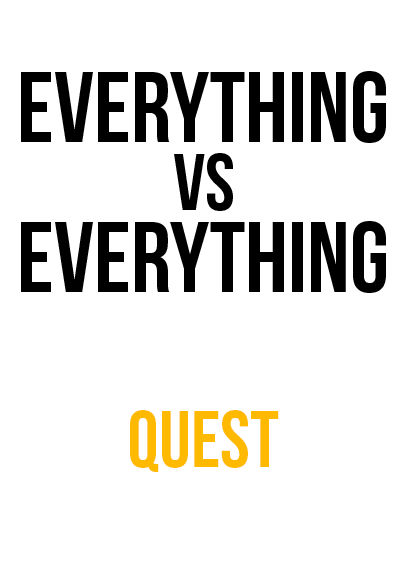
<style>
.page{position:relative;width:408px;height:585px;background:#ffffff}
.page>*{position:absolute;margin:0}
.t1{font:100px "BebasNeue";color:#000000}
.t2{font:80px "BebasNeue";color:#000000}
.t3{font:80px "BebasNeue-Regular";color:#ffba00}
</style>
<div class="page">
<p class="t1" style="left:21px;top:71px;width:365px;height:72px">everything</p>
<p class="t2" style="left:174px;top:153px;width:59px;height:58px">vs</p>
<p class="t1" style="left:21px;top:221px;width:365px;height:72px">everything</p>
<p class="t3" style="left:130px;top:410px;width:149px;height:62px">quest</p>
</div>
